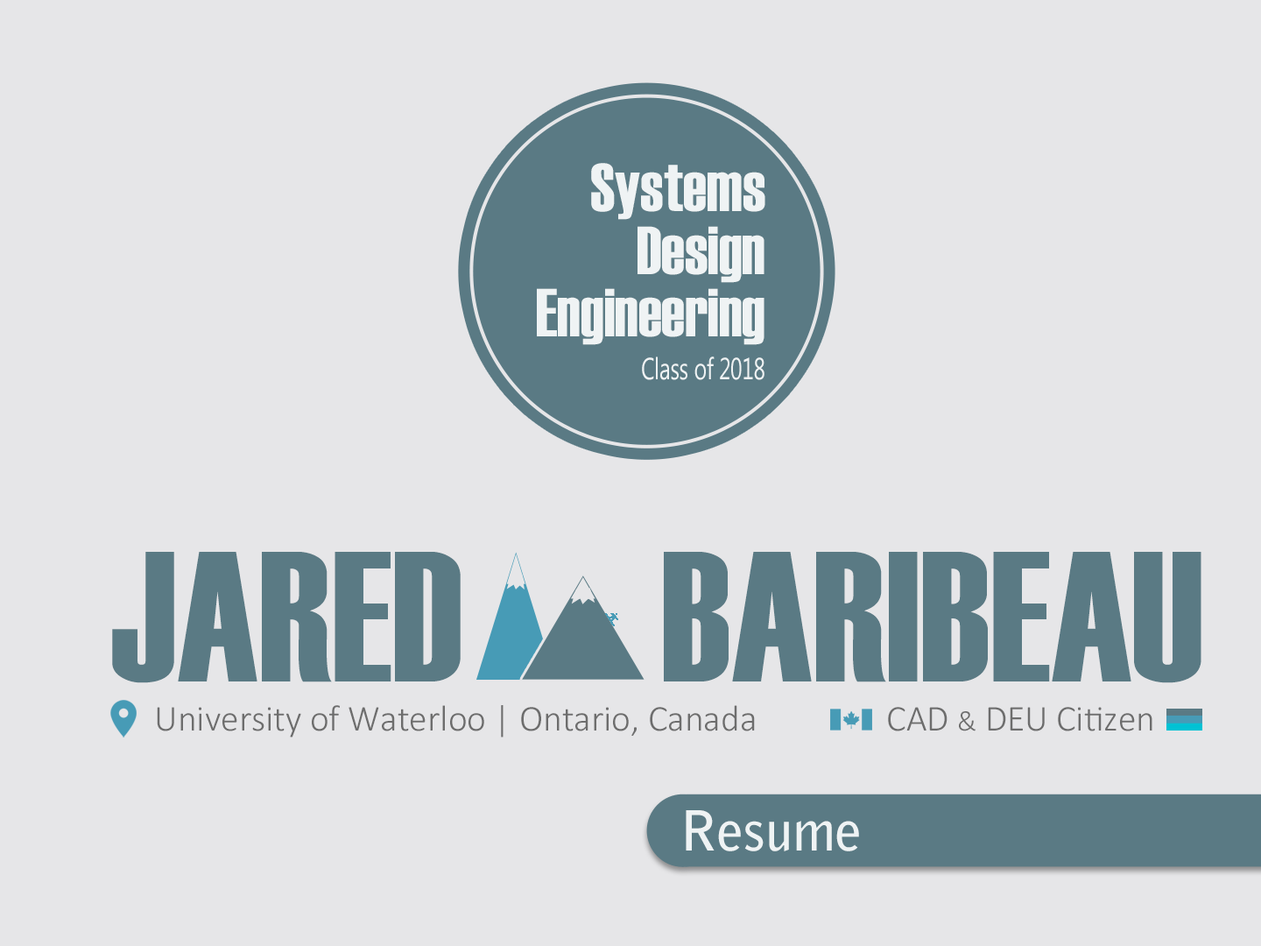
<style>
.page{position:relative;width:1261px;height:946px;background:#e6e6e8}
.page>*{position:absolute;margin:0}
.t1{font:67.9px "Haettenschweiler";color:#eff3f4;scale:0.96 1}
.t2{font:30.2px "MicrosoftNewTaiLue";letter-spacing:-0.01em;color:#eff3f4;scale:0.72 1}
.t3{font:184.9px "Haettenschweiler";color:#5a7a84}
.t4{font:36.5px "Calibri-Light";color:#6d6d6d}
.t5{font:29.2px "Calibri-Light";color:#6d6d6d}
.t6{font:54.7px "BellGothicStd-Bold";color:#eff3f4}
</style>
<div class="page">
<p class="t1" style="left:591px;top:163px;width:174px;height:57px">Systems</p>
<p class="t1" style="left:637px;top:226px;width:127px;height:57px">Design</p>
<p class="t1" style="left:537px;top:288px;width:227px;height:57px">Engineering</p>
<p class="t2" style="left:642px;top:356px;width:122px;height:24px">Class of 2018</p>
<p class="t3" style="left:112px;top:552px;width:1089px;height:131px">JARED      BARIBEAU</p>
<p class="t4" style="left:157px;top:705px;width:598px;height:32px">University of Waterloo | Ontario, Canada</p>
<p class="t4" style="left:888px;top:707px;width:264px;height:24px">CAD <span class="t5">&amp;</span> DEU Citizen</p>
<p class="t6" style="left:686px;top:810px;width:173px;height:41px">Resume</p>
</div>
